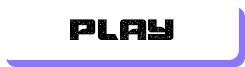
<style>
.page{position:relative;width:245px;height:67px;background:#ffffff}
.page>*{position:absolute;margin:0}
.t1{font:36px "Starcruiser";color:#000000}
</style>
<div class="page">
<p class="t1" style="left:70px;top:19px;width:104px;height:21px">play</p>
</div>
